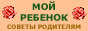
<style>
.page{position:relative;width:88px;height:31px;background:#fcc293}
.page>*{position:absolute;margin:0}
.t1{font:9px "Verdana-Bold";color:#175819;text-transform:uppercase}
.t2{font:6px "Verdana-Bold";color:#9c6506;text-transform:uppercase}
</style>
<div class="page">
<p class="t1" style="left:20px;top:1px;width:48px;height:20px;text-align:center">Мой <br>ребенок</p>
<p class="t2" style="left:7px;top:24px;width:74px;height:6px">Советы родителям</p>
</div>
